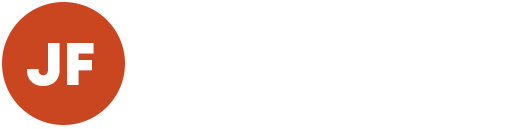
<style>
.page{position:relative;width:520px;height:129px;background:#ffffff}
.page>*{position:absolute;margin:0}
.t1{font:60px "Mont-HeavyDEMO";color:#ffffff}
</style>
<div class="page">
<p class="t1" style="left:27px;top:43px;width:67px;height:43px">JF</p>
</div>
